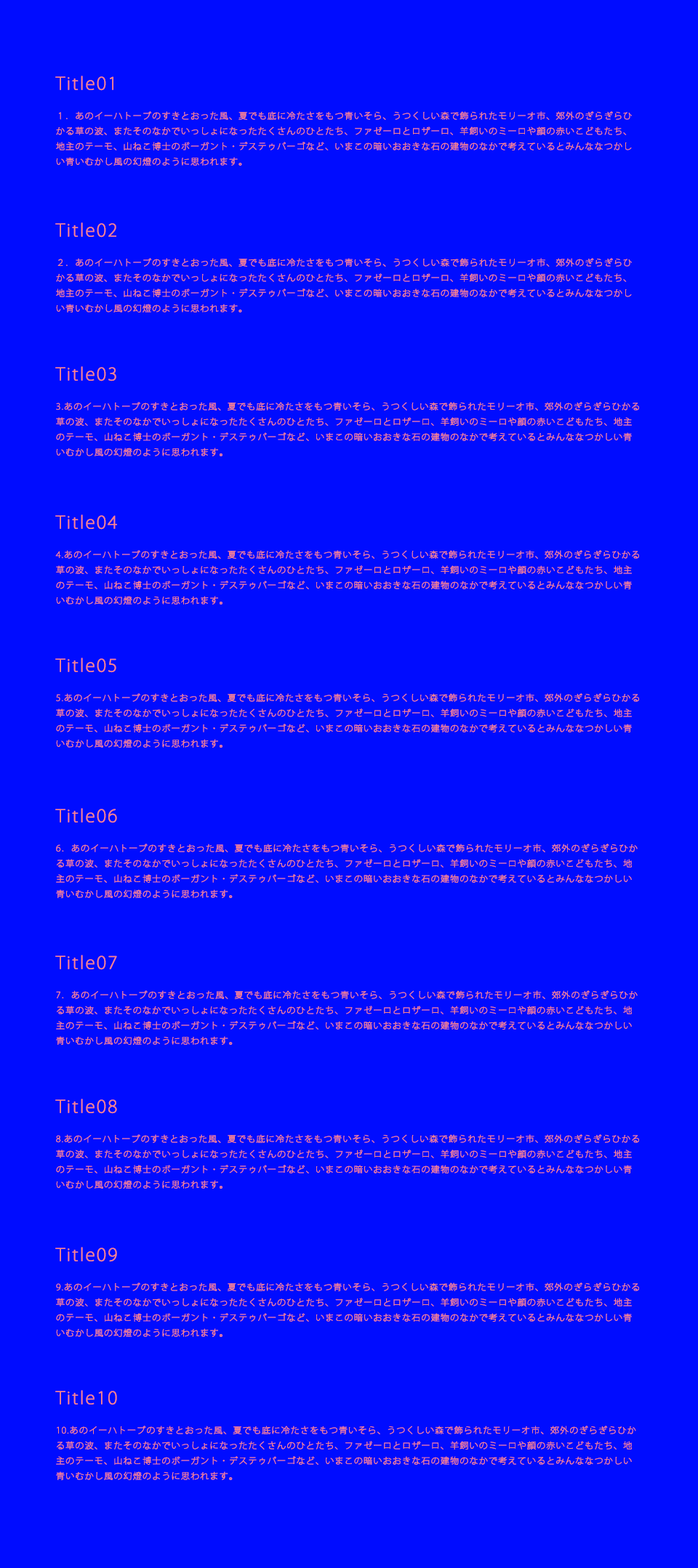
<style>
.page{position:relative;width:698px;height:1568px;background:#000cff}
.page>*{position:absolute;margin:0}
.t1{font:16.9px "KozGoPro-ExtraLight";letter-spacing:0.075em;color:#ff8585;font-weight:bold;scale:1.03 1}
.t2{font:8.5px "KozGoPro-ExtraLight";letter-spacing:0.075em;color:#ff8585;font-weight:bold;scale:1.03 1}
</style>
<div class="page">
<p class="t1" style="left:55px;top:76px;width:58px;height:15px">Title01</p>
<p class="t2" style="left:56px;top:111px;width:575px;height:55px">１．あのイーハトーブのすきとおった風、夏でも底に冷たさをもつ青いそら、うつくしい森で飾られたモリーオ市、郊外のぎらぎらひかる草の波、またそのなかでいっしょになったたくさんのひとたち、ファゼーロとロザーロ、羊飼いのミーロや顔の赤いこどもたち、地主のテーモ、山ねこ博士のボーガント・デステゥパーゴなど、いまこの暗いおおきな石の建物のなかで考えているとみんななつかしい青いむかし風の幻燈のように思われます。</p>
<p class="t1" style="left:55px;top:222px;width:61px;height:16px">Title02</p>
<p class="t2" style="left:56px;top:258px;width:575px;height:54px">２．あのイーハトーブのすきとおった風、夏でも底に冷たさをもつ青いそら、うつくしい森で飾られたモリーオ市、郊外のぎらぎらひかる草の波、またそのなかでいっしょになったたくさんのひとたち、ファゼーロとロザーロ、羊飼いのミーロや顔の赤いこどもたち、地主のテーモ、山ねこ博士のボーガント・デステゥパーゴなど、いまこの暗いおおきな石の建物のなかで考えているとみんななつかしい青いむかし風の幻燈のように思われます。</p>
<p class="t1" style="left:55px;top:366px;width:61px;height:15px">Title03</p>
<p class="t2" style="left:56px;top:402px;width:583px;height:54px">3.あのイーハトーブのすきとおった風、夏でも底に冷たさをもつ青いそら、うつくしい森で飾られたモリーオ市、郊外のぎらぎらひかる草の波、またそのなかでいっしょになったたくさんのひとたち、ファゼーロとロザーロ、羊飼いのミーロや顔の赤いこどもたち、地主のテーモ、山ねこ博士のボーガント・デステゥパーゴなど、いまこの暗いおおきな石の建物のなかで考えているとみんななつかしい青いむかし風の幻燈のように思われます。</p>
<p class="t1" style="left:55px;top:514px;width:62px;height:16px">Title04</p>
<p class="t2" style="left:55px;top:550px;width:584px;height:55px">4.あのイーハトーブのすきとおった風、夏でも底に冷たさをもつ青いそら、うつくしい森で飾られたモリーオ市、郊外のぎらぎらひかる草の波、またそのなかでいっしょになったたくさんのひとたち、ファゼーロとロザーロ、羊飼いのミーロや顔の赤いこどもたち、地主のテーモ、山ねこ博士のボーガント・デステゥパーゴなど、いまこの暗いおおきな石の建物のなかで考えているとみんななつかしい青いむかし風の幻燈のように思われます。</p>
<p class="t1" style="left:55px;top:658px;width:61px;height:15px">Title05</p>
<p class="t2" style="left:56px;top:693px;width:583px;height:55px">5.あのイーハトーブのすきとおった風、夏でも底に冷たさをもつ青いそら、うつくしい森で飾られたモリーオ市、郊外のぎらぎらひかる草の波、またそのなかでいっしょになったたくさんのひとたち、ファゼーロとロザーロ、羊飼いのミーロや顔の赤いこどもたち、地主のテーモ、山ねこ博士のボーガント・デステゥパーゴなど、いまこの暗いおおきな石の建物のなかで考えているとみんななつかしい青いむかし風の幻燈のように思われます。</p>
<p class="t1" style="left:55px;top:808px;width:62px;height:15px">Title06</p>
<p class="t2" style="left:56px;top:844px;width:581px;height:54px">6．あのイーハトーブのすきとおった風、夏でも底に冷たさをもつ青いそら、うつくしい森で飾られたモリーオ市、郊外のぎらぎらひかる草の波、またそのなかでいっしょになったたくさんのひとたち、ファゼーロとロザーロ、羊飼いのミーロや顔の赤いこどもたち、地主のテーモ、山ねこ博士のボーガント・デステゥパーゴなど、いまこの暗いおおきな石の建物のなかで考えているとみんななつかしい青いむかし風の幻燈のように思われます。</p>
<p class="t1" style="left:55px;top:955px;width:62px;height:15px">Title07</p>
<p class="t2" style="left:56px;top:990px;width:581px;height:55px">7．あのイーハトーブのすきとおった風、夏でも底に冷たさをもつ青いそら、うつくしい森で飾られたモリーオ市、郊外のぎらぎらひかる草の波、またそのなかでいっしょになったたくさんのひとたち、ファゼーロとロザーロ、羊飼いのミーロや顔の赤いこどもたち、地主のテーモ、山ねこ博士のボーガント・デステゥパーゴなど、いまこの暗いおおきな石の建物のなかで考えているとみんななつかしい青いむかし風の幻燈のように思われます。</p>
<p class="t1" style="left:55px;top:1099px;width:62px;height:15px">Title08</p>
<p class="t2" style="left:56px;top:1134px;width:583px;height:55px">8.あのイーハトーブのすきとおった風、夏でも底に冷たさをもつ青いそら、うつくしい森で飾られたモリーオ市、郊外のぎらぎらひかる草の波、またそのなかでいっしょになったたくさんのひとたち、ファゼーロとロザーロ、羊飼いのミーロや顔の赤いこどもたち、地主のテーモ、山ねこ博士のボーガント・デステゥパーゴなど、いまこの暗いおおきな石の建物のなかで考えているとみんななつかしい青いむかし風の幻燈のように思われます。</p>
<p class="t1" style="left:55px;top:1247px;width:62px;height:15px">Title09</p>
<p class="t2" style="left:56px;top:1282px;width:583px;height:55px">9.あのイーハトーブのすきとおった風、夏でも底に冷たさをもつ青いそら、うつくしい森で飾られたモリーオ市、郊外のぎらぎらひかる草の波、またそのなかでいっしょになったたくさんのひとたち、ファゼーロとロザーロ、羊飼いのミーロや顔の赤いこどもたち、地主のテーモ、山ねこ博士のボーガント・デステゥパーゴなど、いまこの暗いおおきな石の建物のなかで考えているとみんななつかしい青いむかし風の幻燈のように思われます。</p>
<p class="t1" style="left:55px;top:1390px;width:62px;height:15px">Title10</p>
<p class="t2" style="left:56px;top:1426px;width:580px;height:54px">10.あのイーハトーブのすきとおった風、夏でも底に冷たさをもつ青いそら、うつくしい森で飾られたモリーオ市、郊外のぎらぎらひかる草の波、またそのなかでいっしょになったたくさんのひとたち、ファゼーロとロザーロ、羊飼いのミーロや顔の赤いこどもたち、地主のテーモ、山ねこ博士のボーガント・デステゥパーゴなど、いまこの暗いおおきな石の建物のなかで考えているとみんななつかしい青いむかし風の幻燈のように思われます。</p>
</div>
